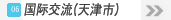
<style>
.page{position:relative;width:171px;height:20px;background:#ffffff}
.page>*{position:absolute;margin:0}
.t1{font:14px "New-Gulim";color:#3f3f3f;font-weight:bold;font-style:italic;scale:0.85 1}
</style>
<div class="page">
<p class="t1" style="left:24px;top:3px;width:95px;height:13px">国际交流(天津市)</p>
</div>
